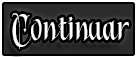
<style>
.page{position:relative;width:137px;height:57px;background:#000000}
.page>*{position:absolute;margin:0}
.t1{font:36px "Songofcoronos";color:#ffffff}
</style>
<div class="page">
<p class="t1" style="left:12px;top:13px;width:117px;height:36px">Continuar</p>
</div>
